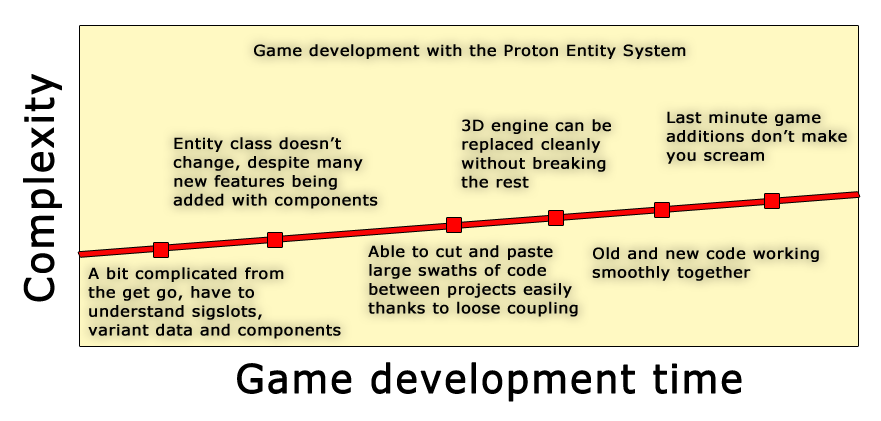
<style>
.page{position:relative;width:881px;height:421px;background:#fff9c2}
.page>*{position:absolute;margin:0}
.t1{font:14.9px "Verdana";letter-spacing:0.025em;color:#000000;font-weight:bold;scale:1.05 1}
.t2{font:37.8px "Verdana";letter-spacing:0.025em;color:#000000;font-weight:bold;scale:1.05 1}
</style>
<div class="page">
<p class="t1" style="left:254px;top:44px;width:432px;height:15px">Game development with the Proton Entity System</p>
<p class="t2" style="left:23px;top:74px;width:39px;height:228px;rotate:180deg">Complexity</p>
<p class="t1" style="left:666px;top:111px;width:181px;height:53px">Last minute game<br>additions don’t make<br>you scream</p>
<p class="t1" style="left:461px;top:119px;width:150px;height:69px">3D engine can be<br>replaced cleanly<br>without breaking<br>the rest</p>
<p class="t1" style="left:173px;top:137px;width:205px;height:72px">Entity class doesn’t<br>change, despite many<br>new features being<br>added with components</p>
<p class="t1" style="left:368px;top:245px;width:210px;height:72px">Able to cut and paste<br>large swaths of code<br>between projects easily<br>thanks to loose coupling</p>
<p class="t1" style="left:592px;top:247px;width:227px;height:34px">Old and new code working<br>smoothly together</p>
<p class="t1" style="left:88px;top:267px;width:253px;height:72px">A bit complicated from<br>the get go, have to<br>understand sigslots,<br>variant data and components</p>
<p class="t2" style="left:237px;top:362px;width:505px;height:40px;rotate:-90deg">Game development time</p>
</div>
